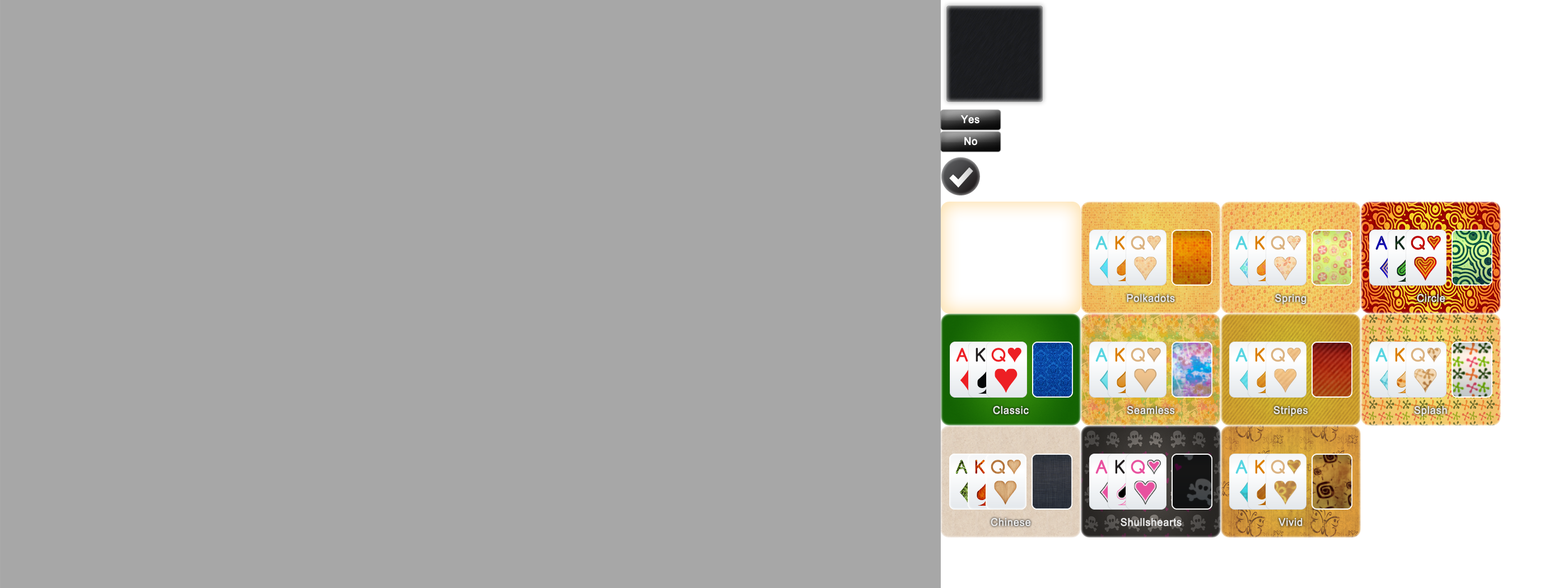
<style>
.page{position:relative;width:1568px;height:588px;background:#a7a7a7}
.page>*{position:absolute;margin:0}
.t1{font:10.6px "ArialMT";letter-spacing:0.025em;color:#ffffff;font-weight:bold;scale:0.95 1}
.t2{font:10.6px "ArialMT";letter-spacing:0.025em;color:#e6e6e6;font-weight:bold;scale:0.95 1}
</style>
<div class="page">
<p class="t1" style="left:961px;top:115px;width:18px;height:9px">Yes</p>
<p class="t1" style="left:964px;top:137px;width:13px;height:9px">No</p>
<p class="t2" style="left:1127px;top:294px;width:48px;height:8px">Polkadots</p>
<p class="t2" style="left:1275px;top:293px;width:31px;height:12px">Spring</p>
<p class="t2" style="left:1417px;top:293px;width:28px;height:9px">Circle</p>
<p class="t2" style="left:993px;top:405px;width:36px;height:9px">Classic</p>
<p class="t2" style="left:1127px;top:405px;width:48px;height:9px">Seamless</p>
<p class="t2" style="left:1273px;top:405px;width:35px;height:12px">Stripes</p>
<p class="t2" style="left:1414px;top:405px;width:33px;height:12px">Splash</p>
<p class="t2" style="left:991px;top:517px;width:40px;height:9px">Chinese</p>
<p class="t2" style="left:1121px;top:517px;width:61px;height:9px">Shullshearts</p>
<p class="t2" style="left:1278px;top:518px;width:25px;height:8px">Vivid</p>
</div>
